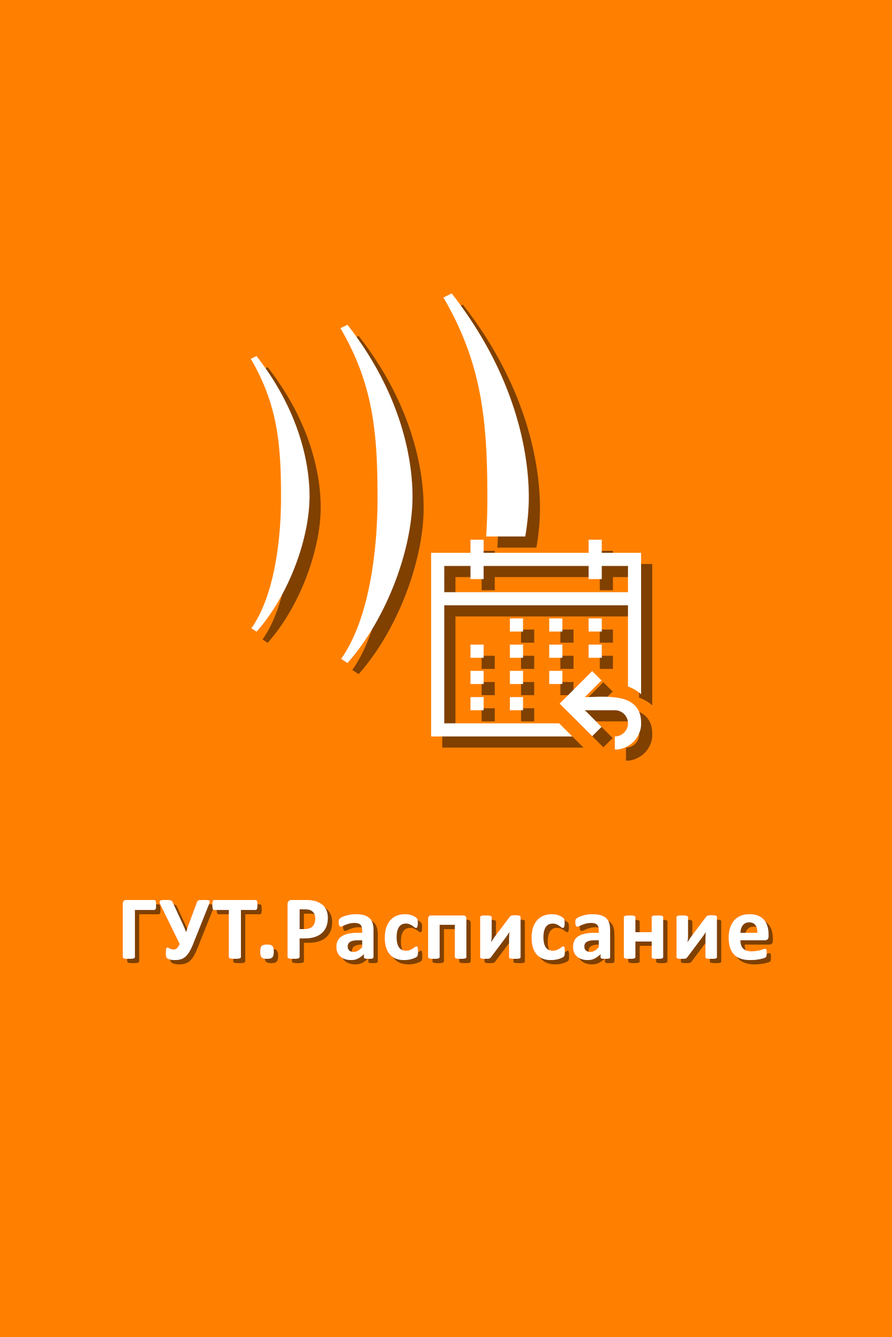
<style>
.page{position:relative;width:892px;height:1337px;background:#ff8000}
.page>*{position:absolute;margin:0}
.t1{font:92.9px "Calibri-Bold";letter-spacing:0.025em;color:#ffffff}
</style>
<div class="page">
<p class="t1" style="left:123px;top:900px;width:645px;height:60px">ГУТ.Расписание</p>
</div>
